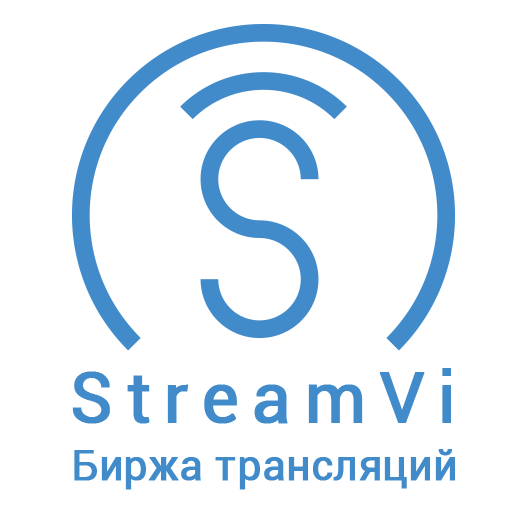
<style>
.page{position:relative;width:522px;height:522px;background:#ffffff}
.page>*{position:absolute;margin:0}
.t1{font:70px "Roboto-Regular";letter-spacing:0.17em;color:#428bca;font-weight:bold}
.t2{font:41.7px "Roboto-Regular";color:#428bca;font-weight:bold}
</style>
<div class="page">
<p class="t1" style="left:72px;top:368px;width:379px;height:56px">StreamVi</p>
<p class="t2" style="left:74px;top:449px;width:381px;height:41px">Биржа трансляций</p>
</div>
